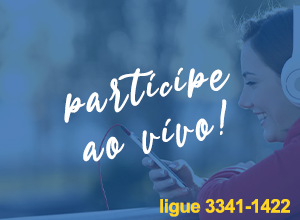
<style>
.page{position:relative;width:300px;height:220px}
.page>*{position:absolute;margin:0}
.t1{font:53.6px/23.7px "EstylleMadison-Regular";letter-spacing:0.075em;color:#fefefe}
.t2{font:18.7px "Arial-BoldMT";letter-spacing:-0.025em;color:#ffd51f}
</style>
<div class="page">
<p class="t1" style="left:64px;top:67px;width:166px;height:95px;text-align:center;rotate:-11deg">participe<br><br>ao vivo!</p>
<p class="t2" style="left:160px;top:199px;width:130px;height:18px">ligue 3341-1422</p>
</div>
